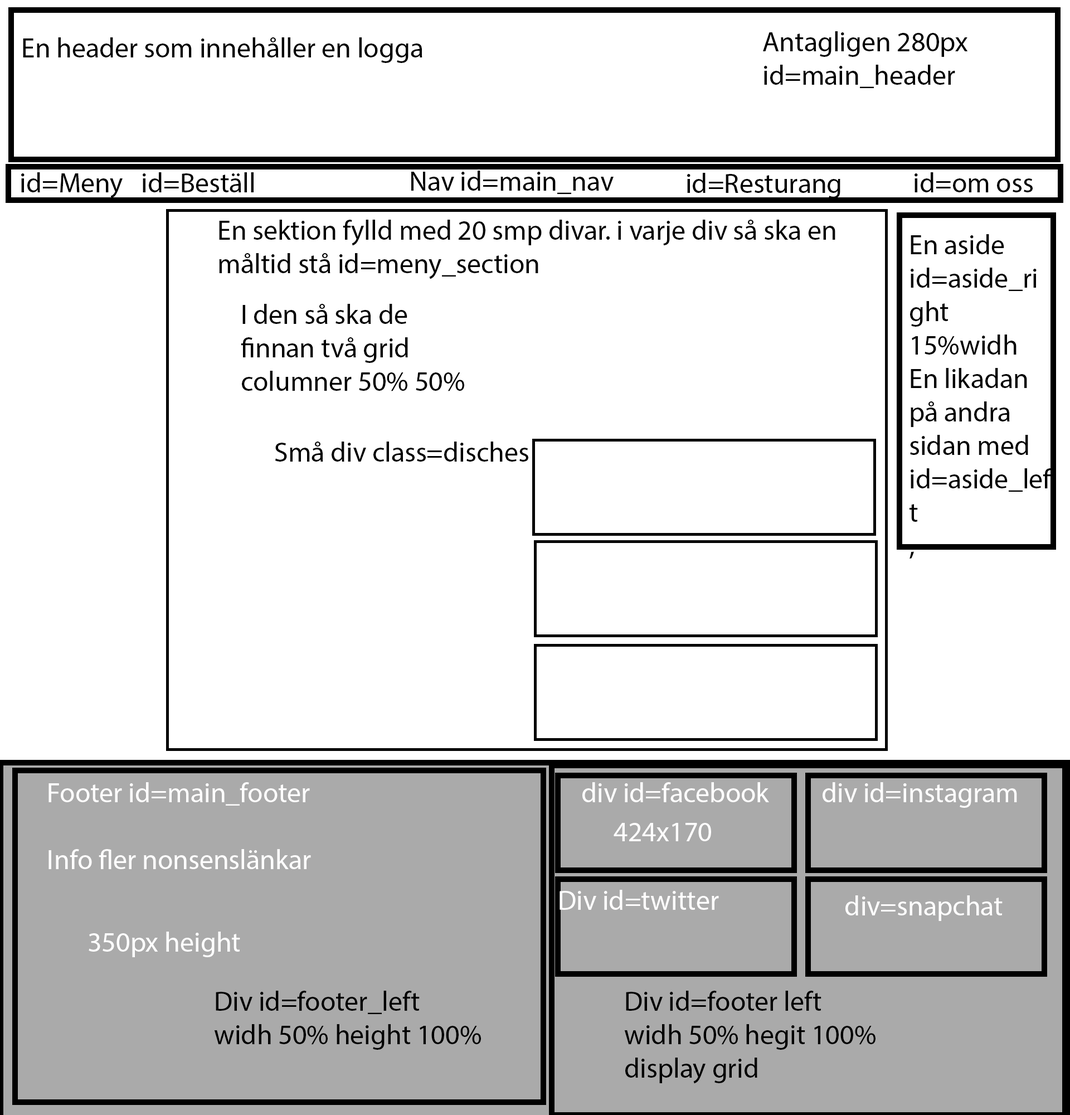
<style>
.page{position:relative;width:1070px;height:1115px;background:#ffffff}
.page>*{position:absolute;margin:0}
.t1{font:27.9px "MyriadPro-Regular";color:#000000}
.t2{font:27.9px "MyriadPro-Regular";color:#fffefe}
.t3{font:27.9px "MyriadPro-Regular";color:#ffffff}
</style>
<div class="page">
<p class="t1" style="left:23px;top:37px;width:399px;height:26px">En header som innehåller en logga</p>
<p class="t1" style="left:763px;top:31px;width:205px;height:57px">Antagligen 280px<br>id=main_header</p>
<p class="t1" style="left:21px;top:172px;width:102px;height:26px">id=Meny</p>
<p class="t1" style="left:143px;top:172px;width:111px;height:20px">id=Beställ</p>
<p class="t1" style="left:411px;top:171px;width:203px;height:23px">Nav id=main_nav</p>
<p class="t1" style="left:687px;top:173px;width:153px;height:25px">id=Resturanger</p>
<p class="t1" style="left:914px;top:172px;width:119px;height:20px">id=om oss</p>
<p class="t1" style="left:219px;top:220px;width:616px;height:59px">En sektion fylld med 20 smp divar. i varje div så ska en måltid stå id=meny_section</p>
<p class="t1" style="left:909px;top:234px;width:143px;height:324px">En aside <br>id=aside_right<br>15%widh<br>En likadan på andra sidan med id=aside_left<br>,</p>
<p class="t1" style="left:241px;top:304px;width:223px;height:87px">I den så ska de finnan två grid columner 50% 50%</p>
<p class="t1" style="left:275px;top:441px;width:253px;height:20px">Små div class=disches</p>
<p class="t2" style="left:48px;top:782px;width:263px;height:87px">Footer id=main_footer<br><br>Info fler nonsenslänkar</p>
<p class="t2" style="left:582px;top:782px;width:187px;height:20px">div id=facebook</p>
<p class="t2" style="left:823px;top:782px;width:194px;height:25px">div id=instagram</p>
<p class="t2" style="left:614px;top:823px;width:97px;height:18px">424x170</p>
<p class="t2" style="left:559px;top:889px;width:160px;height:20px">Div id=twitter</p>
<p class="t2" style="left:845px;top:895px;width:157px;height:26px">div=snapchat</p>
<p class="t3" style="left:89px;top:931px;width:151px;height:26px">350px height</p>
<p class="t1" style="left:214px;top:990px;width:267px;height:59px">Div id=footer_left <br>widh 50% height 100%</p>
<p class="t1" style="left:624px;top:990px;width:251px;height:93px">Div id=footer left<br>widh 50% hegit 100%<br>display grid</p>
</div>
